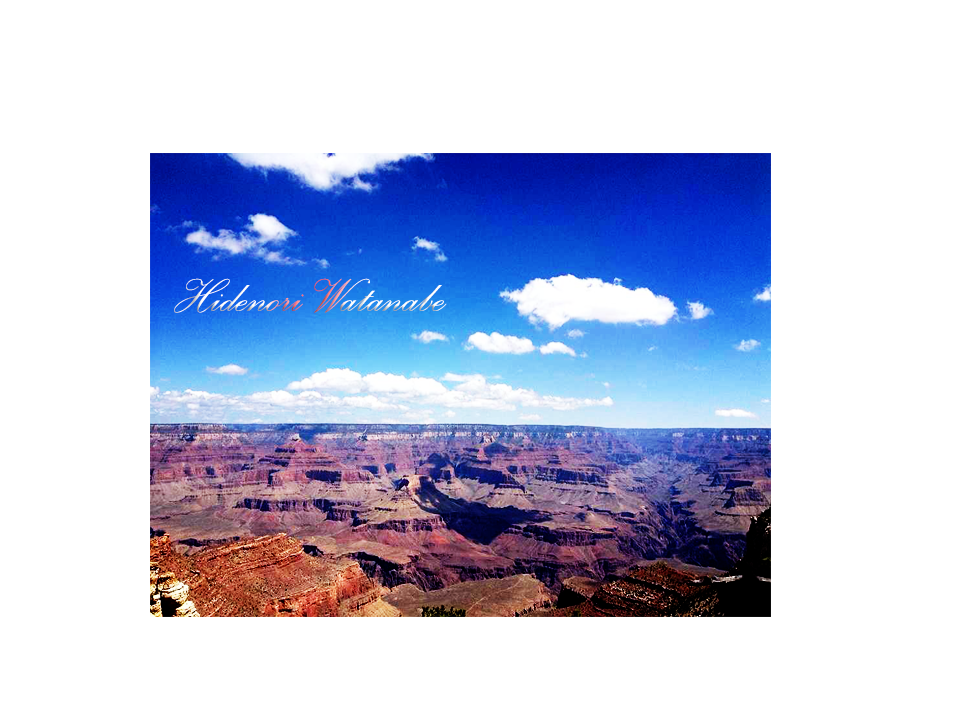
<style>
.page{position:relative;width:960px;height:717px;background:#ffffff}
.page>*{position:absolute;margin:0}
.t1{font:60px "PalaceScriptMT"}
</style>
<div class="page">
<p class="t1" style="left:174px;top:278px;width:273px;height:35px">Hidenori Watanabe<br>Hidenori Watanabe</p>
</div>
